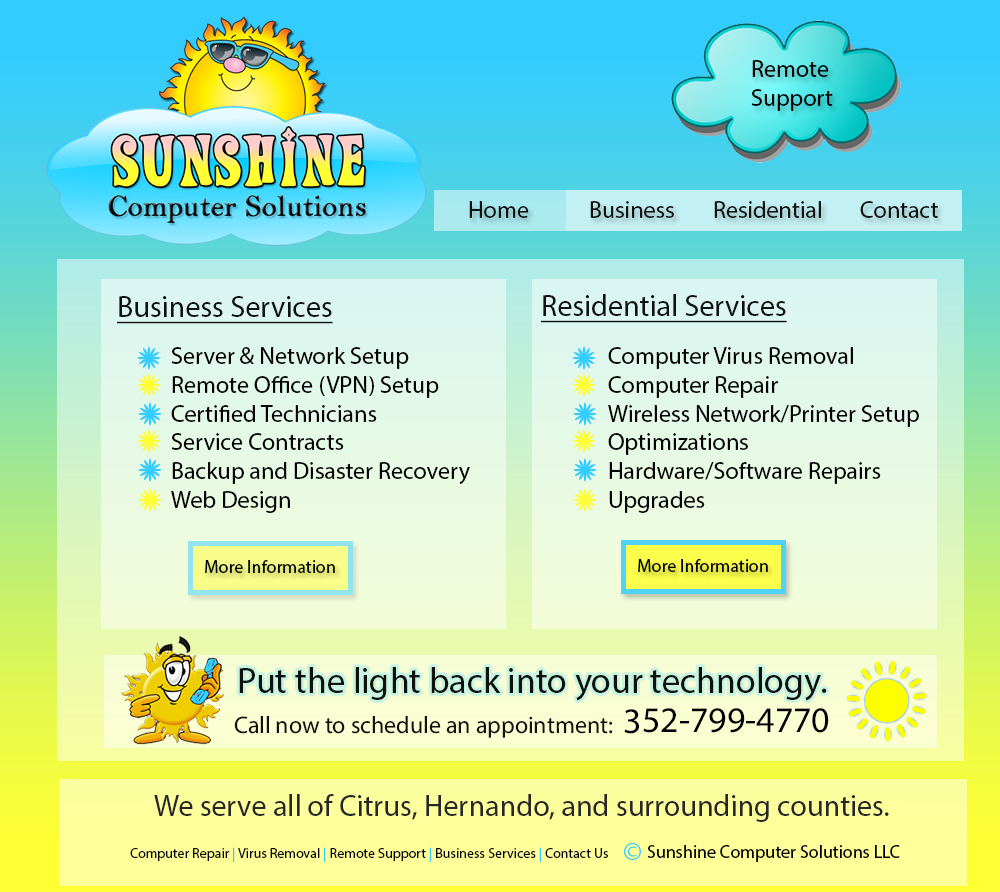
<style>
.page{position:relative;width:1000px;height:892px}
.page>*{position:absolute;margin:0}
.t1{font:24px "MyriadPro-Regular";color:#000000}
.t2{font:24px "MyriadPro-Regular";color:#111110}
.t3{font:30px "MyriadPro-Regular";color:#111110;text-decoration:underline}
.t4{font:18px "MyriadPro-Regular";color:#000000}
.t5{font:36px "MyriadPro-Regular";color:#0f1010}
.t6{font:36px "MyriadPro-Regular";color:#000000}
.t7{font:30px "MyriadPro-Regular";color:#282727}
.t8{font:14px "MyriadPro-Regular";color:#000000}
.t9{font:14px "MyriadPro-Regular";color:#33ccff}
</style>
<div class="page">
<p class="t1" style="left:751px;top:60px;width:82px;height:51px">Remote Support</p>
<p class="t2" style="left:469px;top:201px;width:60px;height:17px">Home</p>
<p class="t2" style="left:590px;top:201px;width:84px;height:17px">Business</p>
<p class="t2" style="left:714px;top:201px;width:107px;height:17px">Residential</p>
<p class="t2" style="left:860px;top:201px;width:78px;height:17px">Contact</p>
<p class="t3" style="left:541px;top:294px;width:246px;height:29px">Residential Services</p>
<p class="t3" style="left:117px;top:296px;width:216px;height:28px">Business Services</p>
<p class="t1" style="left:171px;top:347px;width:299px;height:166px">Server &amp; Network Setup<br>Remote Office (VPN) Setup<br>Certified Technicians<br>Service Contracts<br>Backup and Disaster Recovery<br>Web Design</p>
<p class="t1" style="left:608px;top:347px;width:311px;height:166px">Computer Virus Removal<br>Computer Repair<br>Wireless Network/Printer Setup<br>Optimizations<br>Hardware/Software Repairs<br>Upgrades</p>
<p class="t4" style="left:205px;top:560px;width:130px;height:13px">More Information</p>
<p class="t4" style="left:638px;top:559px;width:130px;height:13px">More Information</p>
<p class="t5" style="left:239px;top:667px;width:588px;height:34px">Put the light back into your technology.</p>
<p class="t2" style="left:234px;top:708px;width:595px;height:30px">Call now to schedule an appointment:  <span class="t6">352-799-4770</span></p>
<p class="t7" style="left:154px;top:794px;width:735px;height:28px">We serve all of Citrus, Hernando, and surrounding counties.</p>
<p class="t4" style="left:647px;top:845px;width:253px;height:17px">Sunshine Computer Solutions LLC</p>
<p class="t8" style="left:130px;top:847px;width:478px;height:15px">Computer Repair<span class="t9"> | </span>Virus Removal <span class="t9">|</span> Remote Support <span class="t9">|</span> Business Services <span class="t9">| </span>Contact Us</p>
</div>
